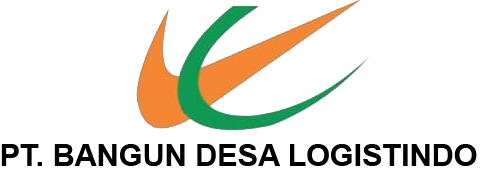
<style>
.page{position:relative;width:480px;height:175px;background:#ffffff}
.page>*{position:absolute;margin:0}
.t1{font:30.6px "Arial-BoldMT";color:#000000}
</style>
<div class="page">
<p class="t1" style="left:1px;top:144px;width:476px;height:22px">PT. BANGUN DESA LOGISTINDO</p>
</div>
